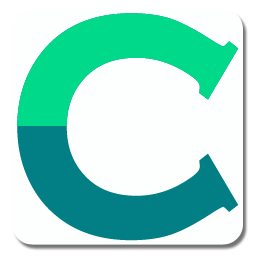
<style>
.page{position:relative;width:256px;height:256px;background:#fdffff}
.page>*{position:absolute;margin:0}
.t1{font:316.9px "CopperplateGothic-Bold";font-weight:bold;scale:0.89 1}
</style>
<div class="page">
<p class="t1" style="left:17px;top:13px;width:222px;height:228px">C</p>
</div>
